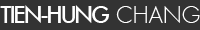
<style>
.page{position:relative;width:200px;height:30px;background:#333333}
.page>*{position:absolute;margin:0}
.t1{font:26px "FuturaMedium";letter-spacing:0.01em;color:#ffffff}
.t2{font:22px "FuturaLight";letter-spacing:0.01em;color:#ffffff}
</style>
<div class="page">
<p class="t1" style="left:0px;top:5px;width:110px;height:18px">TIEN-HUNG</p>
<p class="t2" style="left:116px;top:6px;width:84px;height:17px">CHANG</p>
</div>
